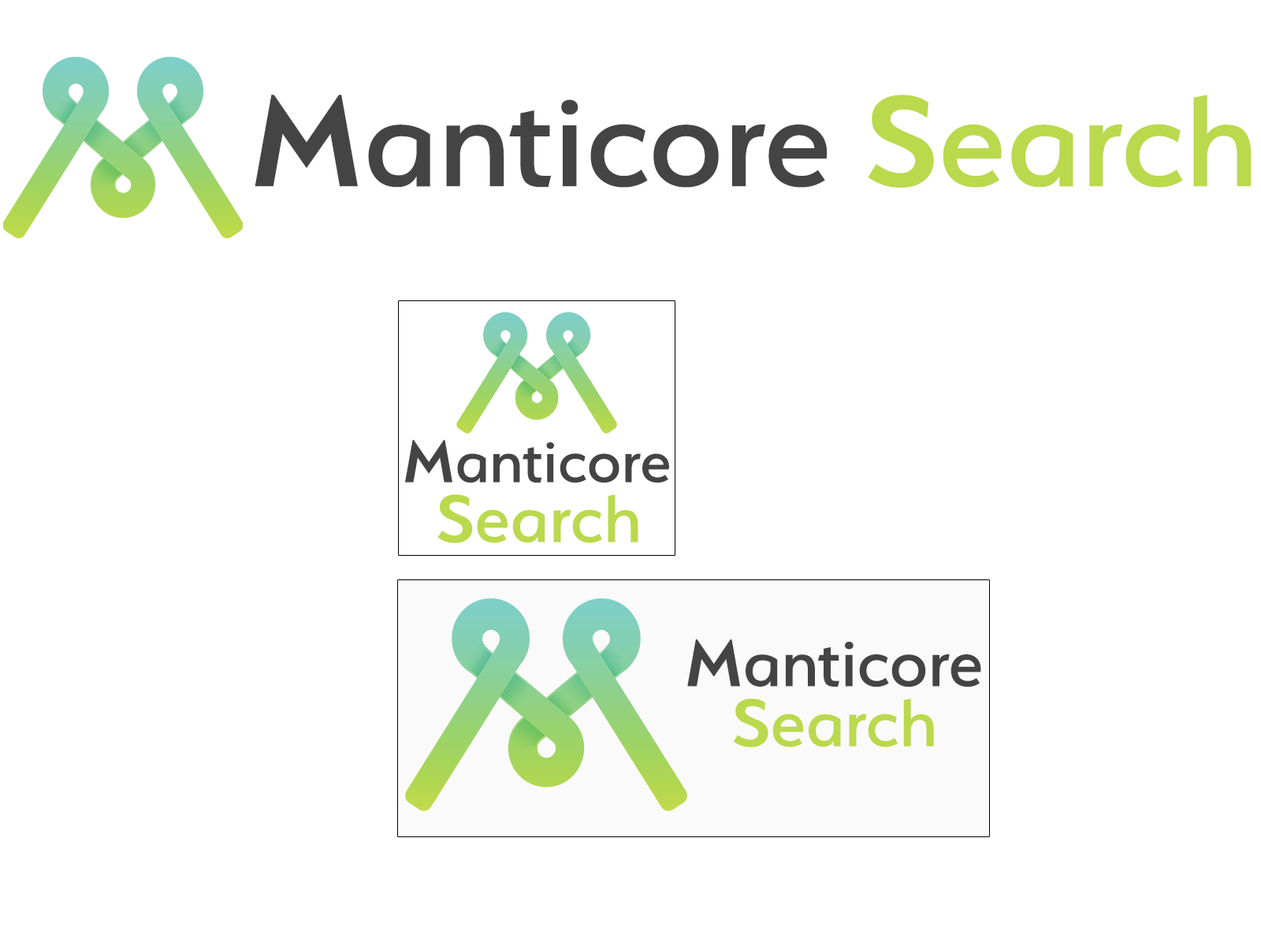
<style>
.page{position:relative;width:1261px;height:946px;background:#ffffff}
.page>*{position:absolute;margin:0}
.t1{font:145.1px "Serenity-Medium";color:#444444;scale:1.03 1}
.t2{font:145.1px "Serenity-DemiBold";color:#444444;scale:1.03 1}
.t3{font:145.1px "Serenity-DemiBold";color:#bad94d;scale:1.03 1}
.t4{font:145.1px "Serenity-Medium";color:#bad94d;scale:1.03 1}
.t5{font:67.4px "Serenity-Medium";color:#444444}
.t6{font:67.4px "Serenity-DemiBold";color:#444444}
.t7{font:75.8px "Serenity-Medium";color:#bad94d;scale:1.03 1}
.t8{font:75.8px "Serenity-DemiBold";color:#bad94d;scale:1.03 1}
.t9{font:74.9px "Serenity-Medium";color:#444444}
.t10{font:74.9px "Serenity-DemiBold";color:#444444}
</style>
<div class="page">
<p class="t1" style="left:255px;top:95px;width:996px;height:93px"><span class="t2">M</span>anticore <span class="t3">S</span><span class="t4">earch</span></p>
<p class="t5" style="left:405px;top:440px;width:264px;height:43px"><span class="t6">M</span>anticore</p>
<p class="t7" style="left:437px;top:494px;width:201px;height:49px"><span class="t8">S</span>earch</p>
<p class="t9" style="left:687px;top:639px;width:294px;height:48px"><span class="t10">M</span>anticore</p>
<p class="t7" style="left:733px;top:698px;width:201px;height:49px"><span class="t8">S</span>earch</p>
</div>
